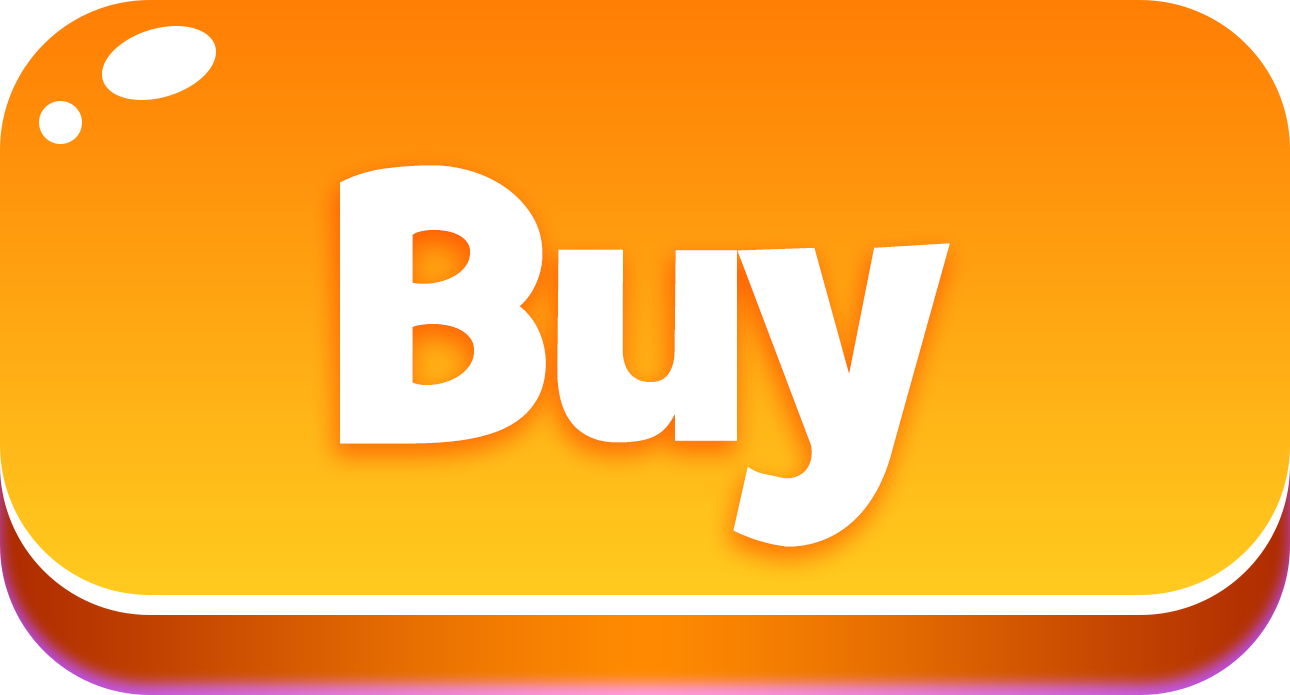
<style>
.page{position:relative;width:1290px;height:695px}
.page>*{position:absolute;margin:0}
.t1{font:375px "Riffic";color:#ffffff}
</style>
<div class="page">
<p class="t1" style="left:340px;top:165px;width:610px;height:382px">Buy</p>
</div>
